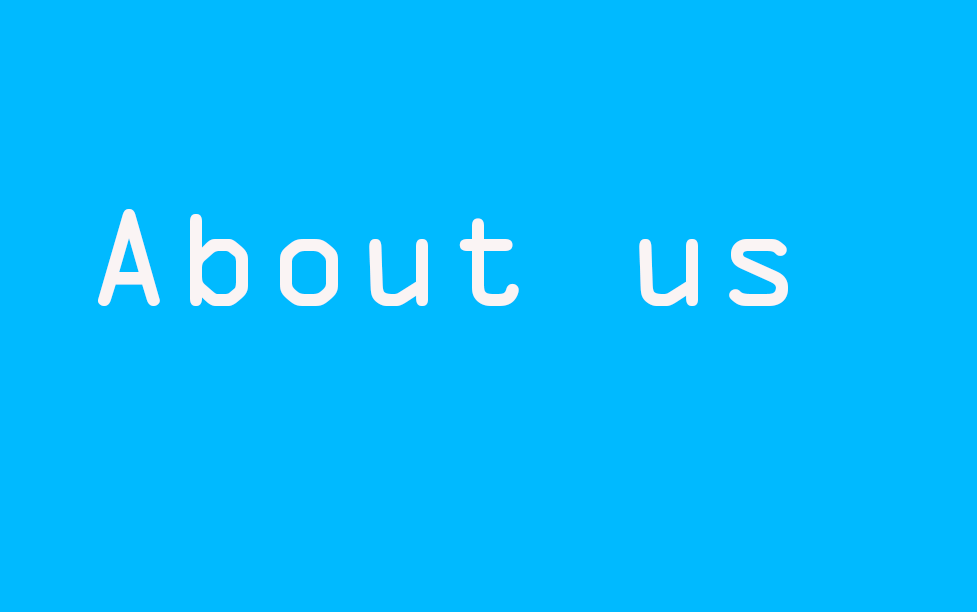
<style>
.page{position:relative;width:977px;height:612px;background:#00baff}
.page>*{position:absolute;margin:0}
.t1{font:125px "OCRAStd";color:#faf4f4}
</style>
<div class="page">
<p class="t1" style="left:98px;top:209px;width:690px;height:97px">About us</p>
</div>
